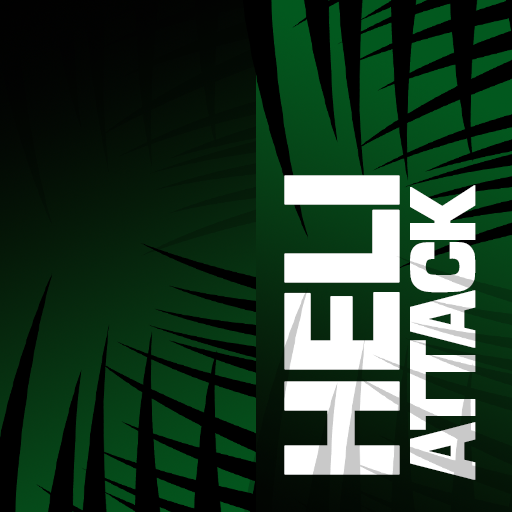
<style>
.page{position:relative;width:512px;height:512px}
.page>*{position:absolute;margin:0}
.t1{font:170.7px "Eurostile-Bla";letter-spacing:-0.05em;color:#ffffff;font-weight:bold;scale:0.91 1}
.t2{font:95.2px "Eurostile-Bla";letter-spacing:-0.05em;color:#ffffff;font-weight:bold;scale:0.86 1}
</style>
<div class="page">
<p class="t1" style="left:284px;top:175px;width:116px;height:300px;rotate:-90deg">HELI</p>
<p class="t2" style="left:410px;top:185px;width:66px;height:295px;rotate:-90deg">ATTACK</p>
</div>
